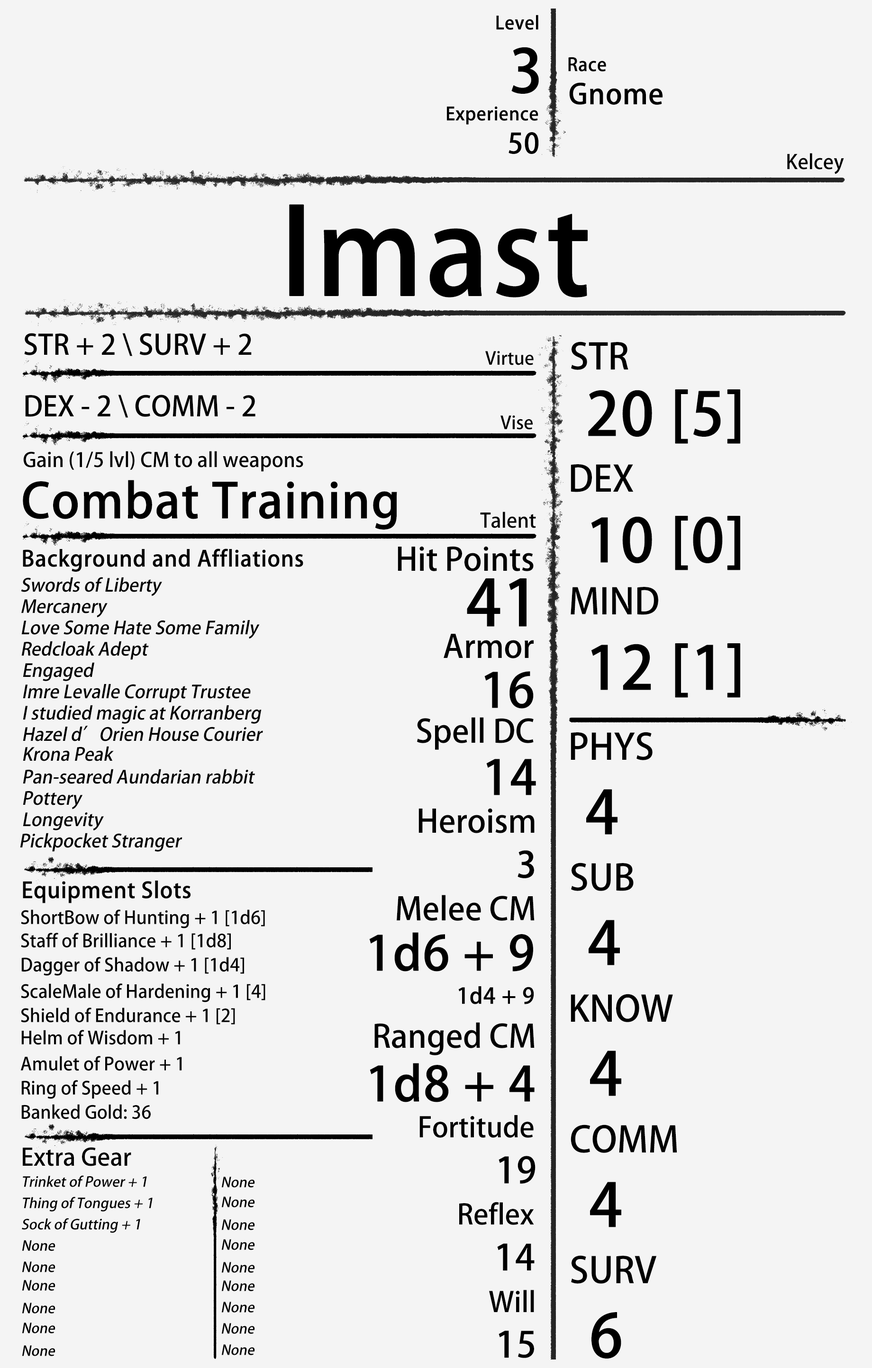
<style>
.page{position:relative;width:872px;height:1368px;background:#f4f4f4}
.page>*{position:absolute;margin:0}
.t1{font:17.8px "AdobeHeitiStd-Regular";color:#000000;font-weight:bold}
.t2{font:59.2px "AdobeHeitiStd-Regular";color:#000000;font-weight:bold}
.t3{font:27.6px "AdobeHeitiStd-Regular";color:#000000;font-weight:bold}
.t4{font:19.7px "AdobeHeitiStd-Regular";color:#000000}
.t5{font:118.4px "AdobeHeitiStd-Regular";color:#000000;font-weight:bold}
.t6{font:27.6px "AdobeHeitiStd-Regular";color:#000000}
.t7{font:35.5px "AdobeHeitiStd-Regular";color:#000000}
.t8{font:17.8px "AdobeHeitiStd-Regular";color:#000000}
.t9{font:47.4px "AdobeHeitiStd-Regular";color:#000000;font-weight:bold}
.t10{font:21.7px "AdobeHeitiStd-Regular";color:#000000;font-weight:bold}
.t11{font:31.6px "AdobeHeitiStd-Regular";color:#000000}
.t12{font:17.8px "AdobeHeitiStd-Regular";color:#000000;font-style:italic}
.t13{font:63.2px "AdobeHeitiStd-Regular";color:#000000;font-weight:bold}
.t14{font:35.5px "AdobeHeitiStd-Regular";color:#000000;font-weight:bold}
.t15{font:23.7px "AdobeHeitiStd-Regular";color:#000000}
.t16{font:13.8px "AdobeHeitiStd-Regular";color:#000000;font-style:italic}
</style>
<div class="page">
<p class="t1" style="left:496px;top:15px;width:42px;height:15px">Level</p>
<p class="t2" style="left:511px;top:47px;width:28px;height:47px">3</p>
<p class="t1" style="left:568px;top:57px;width:38px;height:15px">Race</p>
<p class="t3" style="left:569px;top:82px;width:93px;height:23px">Gnome</p>
<p class="t1" style="left:447px;top:106px;width:91px;height:19px">Experience</p>
<p class="t3" style="left:508px;top:132px;width:31px;height:22px">50</p>
<p class="t4" style="left:787px;top:153px;width:57px;height:21px">Kelcey</p>
<p class="t5" style="left:289px;top:204px;width:298px;height:93px">Imast</p>
<p class="t6" style="left:24px;top:333px;width:228px;height:23px">STR + 2 \ SURV + 2</p>
<p class="t7" style="left:571px;top:342px;width:57px;height:28px">STR</p>
<p class="t8" style="left:485px;top:351px;width:48px;height:14px">Virtue</p>
<p class="t2" style="left:588px;top:389px;width:152px;height:55px">20 [5]</p>
<p class="t6" style="left:25px;top:395px;width:230px;height:23px">DEX - 2 \ COMM - 2</p>
<p class="t8" style="left:500px;top:415px;width:32px;height:15px">Vise</p>
<p class="t4" style="left:23px;top:451px;width:280px;height:21px">Gain (1/5 lvl) CM to all weapons</p>
<p class="t7" style="left:570px;top:464px;width:63px;height:28px">DEX</p>
<p class="t9" style="left:23px;top:480px;width:374px;height:50px">Combat Training</p>
<p class="t4" style="left:480px;top:512px;width:56px;height:16px">Talent</p>
<p class="t2" style="left:591px;top:516px;width:149px;height:54px">10 [0]</p>
<p class="t10" style="left:23px;top:549px;width:280px;height:23px">Background and Affliations</p>
<p class="t11" style="left:397px;top:546px;width:136px;height:25px">Hit Points</p>
<p class="t12" style="left:21px;top:577px;width:141px;height:19px">Swords of Liberty</p>
<p class="t13" style="left:467px;top:578px;width:59px;height:49px">41</p>
<p class="t7" style="left:570px;top:587px;width:88px;height:28px">MIND</p>
<p class="t12" style="left:21px;top:599px;width:87px;height:19px">Mercanery</p>
<p class="t12" style="left:21px;top:620px;width:239px;height:19px">Love Some Hate Some Family</p>
<p class="t12" style="left:21px;top:641px;width:128px;height:19px">Redcloak Adept</p>
<p class="t11" style="left:443px;top:634px;width:90px;height:24px">Armor</p>
<p class="t2" style="left:591px;top:643px;width:149px;height:55px">12 [1]</p>
<p class="t12" style="left:23px;top:662px;width:71px;height:19px">Engaged</p>
<p class="t9" style="left:484px;top:671px;width:49px;height:38px">16</p>
<p class="t12" style="left:23px;top:684px;width:228px;height:19px">Imre Levalle Corrupt Trustee</p>
<p class="t12" style="left:23px;top:705px;width:238px;height:19px">I studied magic at Korranberg</p>
<p class="t12" style="left:23px;top:726px;width:240px;height:15px">Hazel d’Orien House Courier</p>
<p class="t11" style="left:417px;top:717px;width:116px;height:33px">Spell DC</p>
<p class="t7" style="left:570px;top:732px;width:82px;height:28px">PHYS</p>
<p class="t12" style="left:23px;top:746px;width:91px;height:15px">Krona Peak</p>
<p class="t9" style="left:486px;top:759px;width:50px;height:36px">14</p>
<p class="t12" style="left:23px;top:769px;width:232px;height:15px">Pan-seared Aundarian rabbit</p>
<p class="t12" style="left:23px;top:791px;width:60px;height:19px">Pottery</p>
<p class="t2" style="left:586px;top:789px;width:31px;height:46px">4</p>
<p class="t11" style="left:418px;top:808px;width:116px;height:25px">Heroism</p>
<p class="t12" style="left:23px;top:812px;width:81px;height:19px">Longevity</p>
<p class="t12" style="left:20px;top:833px;width:162px;height:19px">Pickpocket Stranger</p>
<p class="t14" style="left:517px;top:850px;width:17px;height:28px">3</p>
<p class="t7" style="left:571px;top:863px;width:62px;height:28px">SUB</p>
<p class="t10" style="left:23px;top:881px;width:167px;height:22px">Equipment Slots</p>
<p class="t11" style="left:396px;top:895px;width:138px;height:26px">Melee CM</p>
<p class="t8" style="left:21px;top:910px;width:244px;height:18px">ShortBow of Hunting + 1 [1d6]</p>
<p class="t2" style="left:588px;top:920px;width:32px;height:45px">4</p>
<p class="t8" style="left:21px;top:933px;width:210px;height:17px">Staff of Brilliance + 1 [1d8]</p>
<p class="t9" style="left:369px;top:932px;width:164px;height:40px">1d6 + 9</p>
<p class="t8" style="left:21px;top:957px;width:223px;height:19px">Dagger of Shadow + 1 [1d4]</p>
<p class="t8" style="left:21px;top:983px;width:244px;height:19px">ScaleMale of Hardening + 1 [4]</p>
<p class="t10" style="left:458px;top:986px;width:76px;height:18px">1d4 + 9</p>
<p class="t7" style="left:570px;top:994px;width:103px;height:28px">KNOW</p>
<p class="t8" style="left:21px;top:1008px;width:214px;height:17px">Shield of Endurance + 1 [2]</p>
<p class="t11" style="left:374px;top:1022px;width:160px;height:33px">Ranged CM</p>
<p class="t8" style="left:21px;top:1030px;width:159px;height:15px">Helm of Wisdom + 1</p>
<p class="t8" style="left:20px;top:1056px;width:162px;height:15px">Amulet of Power + 1</p>
<p class="t2" style="left:590px;top:1051px;width:31px;height:45px">4</p>
<p class="t9" style="left:369px;top:1063px;width:165px;height:39px">1d8 + 4</p>
<p class="t8" style="left:21px;top:1080px;width:137px;height:19px">Ring of Speed + 1</p>
<p class="t8" style="left:21px;top:1104px;width:130px;height:15px">Banked Gold: 36</p>
<p class="t6" style="left:419px;top:1115px;width:114px;height:23px">Fortitude</p>
<p class="t7" style="left:570px;top:1125px;width:107px;height:28px">COMM</p>
<p class="t15" style="left:23px;top:1147px;width:108px;height:19px">Extra Gear</p>
<p class="t14" style="left:498px;top:1156px;width:37px;height:28px">19</p>
<p class="t16" style="left:23px;top:1175px;width:124px;height:12px">Trinket of Power + 1</p>
<p class="t16" style="left:221px;top:1177px;width:34px;height:11px">None</p>
<p class="t2" style="left:590px;top:1182px;width:31px;height:45px">4</p>
<p class="t16" style="left:23px;top:1197px;width:130px;height:15px">Thing of Tongues + 1</p>
<p class="t16" style="left:221px;top:1197px;width:34px;height:10px">None</p>
<p class="t6" style="left:459px;top:1202px;width:75px;height:23px">Reflex</p>
<p class="t16" style="left:22px;top:1218px;width:118px;height:15px">Sock of Gutting + 1</p>
<p class="t16" style="left:221px;top:1219px;width:34px;height:11px">None</p>
<p class="t16" style="left:22px;top:1240px;width:33px;height:11px">None</p>
<p class="t16" style="left:221px;top:1239px;width:34px;height:11px">None</p>
<p class="t14" style="left:497px;top:1243px;width:37px;height:28px">14</p>
<p class="t16" style="left:22px;top:1261px;width:33px;height:11px">None</p>
<p class="t16" style="left:221px;top:1262px;width:34px;height:11px">None</p>
<p class="t7" style="left:571px;top:1255px;width:86px;height:29px">SURV</p>
<p class="t16" style="left:22px;top:1280px;width:33px;height:11px">None</p>
<p class="t16" style="left:221px;top:1280px;width:34px;height:11px">None</p>
<p class="t6" style="left:489px;top:1290px;width:45px;height:22px">Will</p>
<p class="t16" style="left:221px;top:1302px;width:34px;height:11px">None</p>
<p class="t16" style="left:22px;top:1303px;width:33px;height:11px">None</p>
<p class="t2" style="left:591px;top:1312px;width:30px;height:47px">6</p>
<p class="t16" style="left:22px;top:1323px;width:33px;height:10px">None</p>
<p class="t16" style="left:221px;top:1323px;width:34px;height:11px">None</p>
<p class="t14" style="left:498px;top:1331px;width:36px;height:27px">15</p>
<p class="t16" style="left:22px;top:1345px;width:33px;height:11px">None</p>
<p class="t16" style="left:221px;top:1344px;width:34px;height:11px">None</p>
</div>
